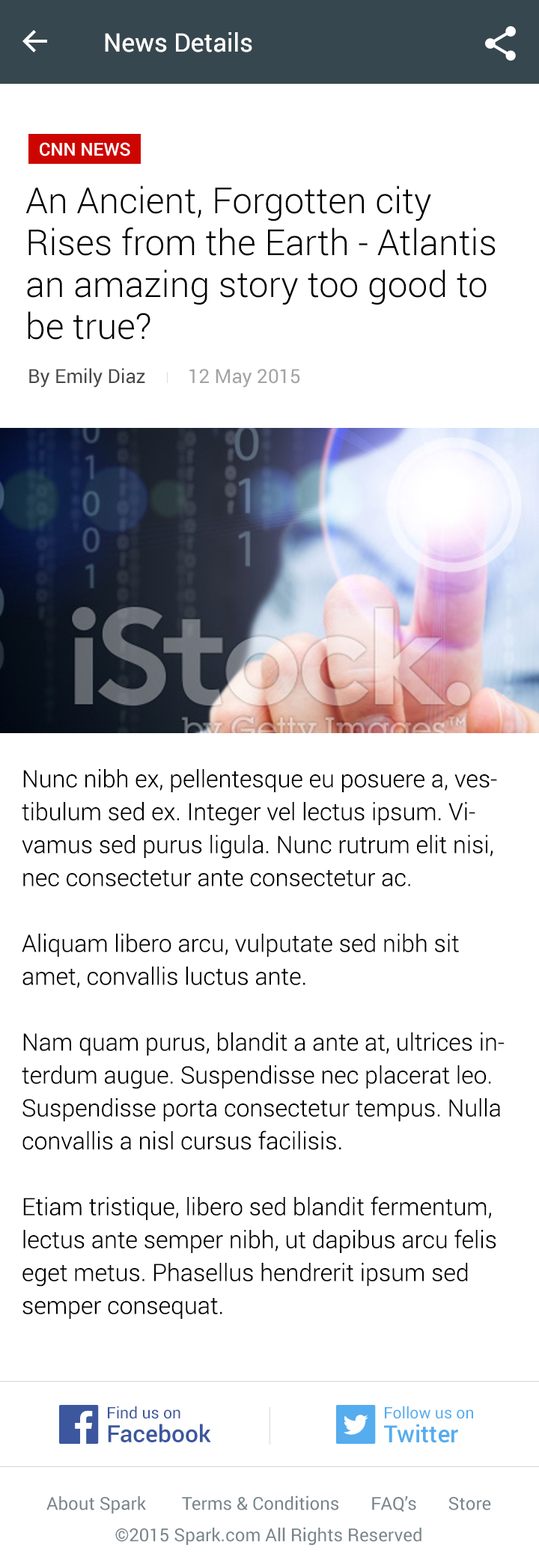
<style>
.page{position:relative;width:539px;height:1568px;background:#ffffff}
.page>*{position:absolute;margin:0}
.t1{font:25.4px "Roboto-Regular";color:#ffffff}
.t2{font:18px "Roboto-Medium";color:#ffffff;text-transform:uppercase}
.t3{font:35.9px/41.9px "Roboto-Light";color:#000000}
.t4{font:19.5px "Roboto-Regular";color:#474747}
.t5{font:19.5px "Roboto-Regular";color:#a3a3a3}
.t6{font:23.9px/32.9px "Roboto-Light";color:#010101}
.t7{font:15.8px "Roboto-Regular";color:#3c579e}
.t8{font:15.8px "Roboto-Regular";color:#55acee}
.t9{font:23.7px "Roboto-Medium";color:#3c579e}
.t10{font:23.7px "Roboto-Medium";color:#55acee}
.t11{font:18px/31.4px "Roboto-Regular";color:#78858b}
</style>
<div class="page">
<p class="t1" style="left:105px;top:32px;width:147px;height:20px">News Details</p>
<p class="t2" style="left:40px;top:142px;width:90px;height:14px">cnn News</p>
<p class="t3" style="left:25px;top:186px;width:470px;height:154px">An Ancient, Forgotten city Rises from the Earth - Atlantis an amazing story too good to be true?</p>
<p class="t4" style="left:29px;top:368px;width:116px;height:20px">By Emily Diaz</p>
<p class="t5" style="left:189px;top:369px;width:111px;height:19px">12 May 2015</p>
<p class="t6" style="left:22px;top:769px;width:482px;height:550px">Nunc nibh ex, pellentesque eu posuere a, vestibulum sed ex. Integer vel lectus ipsum. Vivamus sed purus ligula. Nunc rutrum elit nisi, nec consectetur ante consectetur ac.<br><br>Aliquam libero arcu, vulputate sed nibh sit amet, convallis luctus ante.<br><br>Nam quam purus, blandit a ante at, ultrices interdum augue. Suspendisse nec placerat leo. Suspendisse porta consectetur tempus. Nulla convallis a nisl cursus facilisis.<br><br>Etiam tristique, libero sed blandit fermentum, lectus ante semper nibh, ut dapibus arcu felis eget metus. Phasellus hendrerit ipsum sed semper consequat.</p>
<p class="t7" style="left:108px;top:1406px;width:72px;height:13px">Find us on</p>
<p class="t8" style="left:385px;top:1406px;width:88px;height:13px">Follow us on</p>
<p class="t9" style="left:108px;top:1424px;width:103px;height:18px">Facebook</p>
<p class="t10" style="left:384px;top:1424px;width:74px;height:19px">Twitter</p>
<p class="t11" style="left:46px;top:1495px;width:445px;height:51px;text-align:center">About Spark        Terms &amp; Conditions       FAQ’s       Store<br>©2015 Spark.com All Rights Reserved</p>
</div>
